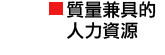
<style>
.page{position:relative;width:165px;height:55px;background:#ffffff}
.page>*{position:absolute;margin:0}
.t1{font:18px/21.3px "DFLiHei-Md-WIN-BF";color:#000000}
</style>
<div class="page">
<p class="t1" style="left:67px;top:1px;width:89px;height:38px">質量兼具的<br>人力資源</p>
</div>
